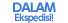
<style>
.page{position:relative;width:68px;height:23px;background:#ffffff}
.page>*{position:absolute;margin:0}
.t1{font:9px/9px "UDShinGoPro-Bold";letter-spacing:-0.08em;color:#397ed4}
.t2{font:12px/10px "UDShinGoPro-Bold";letter-spacing:-0.08em;color:#397ed4}
</style>
<div class="page">
<p class="t1" style="left:13px;top:2px;width:43px;height:22px;text-align:center"><span class="t2">DALAM<br></span>Ekspedisi!</p>
</div>
